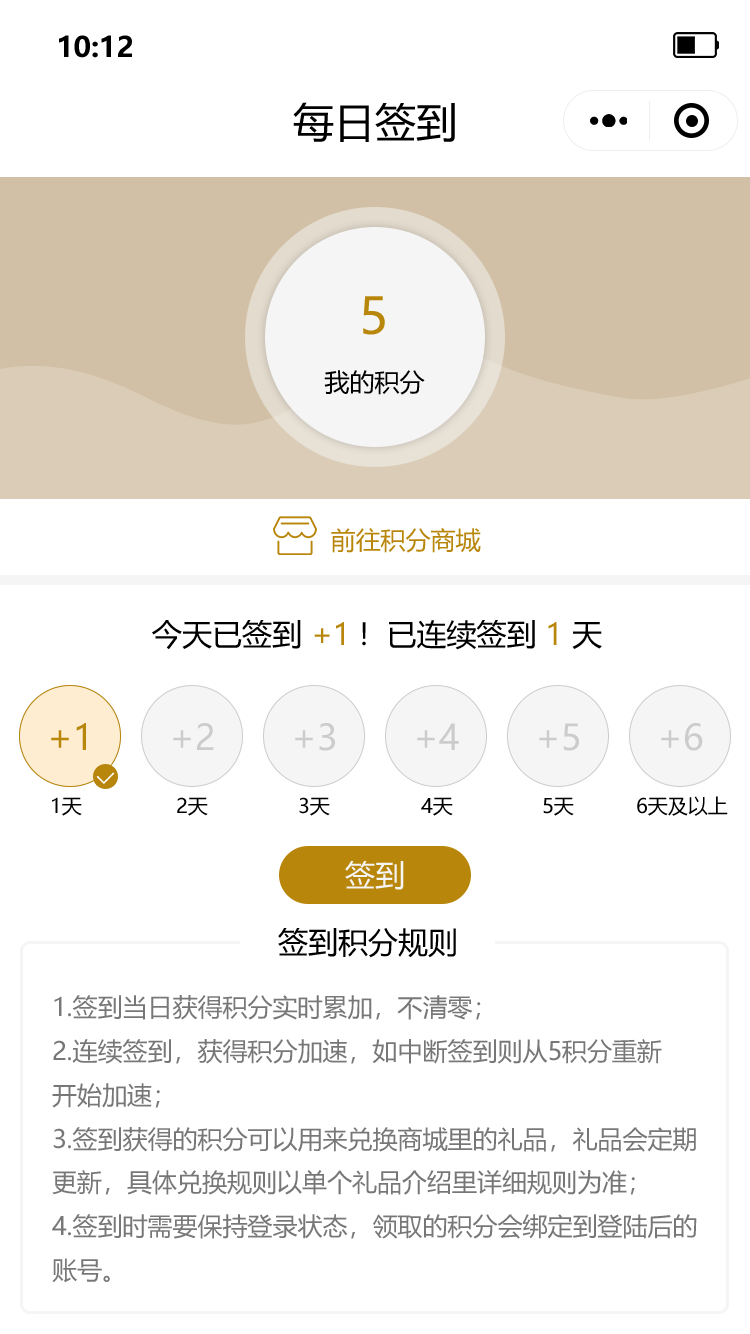
<style>
.page{position:relative;width:750px;height:1334px;background:#ffffff}
.page>*{position:absolute;margin:0}
.t1{font:28.1px "MicrosoftYaHei-Bold";color:#000000}
.t2{font:41px "MicrosoftYaHei";color:#000000}
.t3{font:50px "MicrosoftYaHei";color:#b8860b}
.t4{font:25px "MicrosoftYaHei";color:#000000}
.t5{font:25px "MicrosoftYaHei";color:#b8860b}
.t6{font:30px "MicrosoftYaHei";color:#000000}
.t7{font:30px "MicrosoftYaHei";color:#b8860b}
.t8{font:35px "MicrosoftYaHei";color:#b8860b}
.t9{font:35px "MicrosoftYaHei";color:#cccccc}
.t10{font:20px "MicrosoftYaHei";color:#000000}
.t11{font:30px "MicrosoftYaHei";color:#f5f5f5}
.t12{font:25px "MicrosoftYaHei";color:#777777}
</style>
<div class="page">
<p class="t1" style="left:59px;top:35px;width:73px;height:23px">10:12</p>
<p class="t2" style="left:293px;top:102px;width:162px;height:40px">每日签到</p>
<p class="t3" style="left:363px;top:296px;width:22px;height:39px">5</p>
<p class="t4" style="left:324px;top:370px;width:101px;height:25px">我的积分</p>
<p class="t5" style="left:331px;top:528px;width:150px;height:25px">前往积分商城</p>
<p class="t6" style="left:152px;top:620px;width:450px;height:30px">今天已签到 <span class="t7">+1</span> !  已连续签到 <span class="t7">1</span> 天</p>
<p class="t8" style="left:51px;top:723px;width:35px;height:27px">+1</p>
<p class="t8" style="left:51px;top:723px;width:35px;height:27px">+1</p>
<p class="t9" style="left:173px;top:723px;width:41px;height:27px">+2</p>
<p class="t9" style="left:295px;top:723px;width:40px;height:28px">+3</p>
<p class="t9" style="left:417px;top:723px;width:42px;height:27px">+4</p>
<p class="t9" style="left:539px;top:723px;width:40px;height:28px">+5</p>
<p class="t9" style="left:661px;top:723px;width:42px;height:28px">+6</p>
<p class="t10" style="left:52px;top:797px;width:30px;height:19px">1天</p>
<p class="t10" style="left:177px;top:797px;width:31px;height:19px">2天</p>
<p class="t10" style="left:299px;top:797px;width:31px;height:19px">3天</p>
<p class="t10" style="left:421px;top:797px;width:32px;height:19px">4天</p>
<p class="t10" style="left:543px;top:797px;width:31px;height:19px">5天</p>
<p class="t10" style="left:637px;top:796px;width:91px;height:20px">6天及以上</p>
<p class="t11" style="left:345px;top:861px;width:59px;height:29px">签到</p>
<p class="t6" style="left:278px;top:928px;width:178px;height:30px">签到积分规则</p>
<p class="t12" style="left:52px;top:995px;width:645px;height:288px">1.签到当日获得积分实时累加，不清零；<br>2.连续签到，获得积分加速，如中断签到则从5积分重新<br>开始加速；<br>3.签到获得的积分可以用来兑换商城里的礼品，礼品会定期<br>更新，具体兑换规则以单个礼品介绍里详细规则为准；<br>4.签到时需要保持登录状态，领取的积分会绑定到登陆后的<br>账号。</p>
</div>
